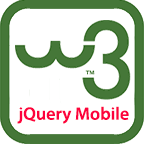
<style>
.page{position:relative;width:144px;height:144px;background:#ffffff}
.page>*{position:absolute;margin:0}
.t1{font:18px "MyriadPro-Semibold";color:#fd023d}
</style>
<div class="page">
<p class="t1" style="left:17px;top:106px;width:112px;height:18px">jQuery Mobile</p>
</div>
